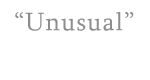
<style>
.page{position:relative;width:150px;height:80px;background:#ffffff}
.page>*{position:absolute;margin:0}
.t1{font:26px "Sylfaen";letter-spacing:0.05em;color:#8e8e8e}
</style>
<div class="page">
<p class="t1" style="left:15px;top:12px;width:119px;height:19px">“Unusual”</p>
</div>
